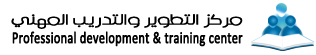
<style>
.page{position:relative;width:316px;height:55px;background:#ffffff}
.page>*{position:absolute;margin:0}
.t1{font:13.6px "TkiArt";color:#000000;font-weight:bold;scale:1.45 1}
.t2{font:16.5px "Calibri";color:#000000;font-weight:bold;scale:0.74 1}
</style>
<div class="page">
<p class="t1" style="left:11px;top:14px;width:232px;height:15px">مركز التطوير والتدريب المهني</p>
<p class="t2" style="left:12px;top:31px;width:231px;height:16px">Professional development &amp; training center</p>
</div>
